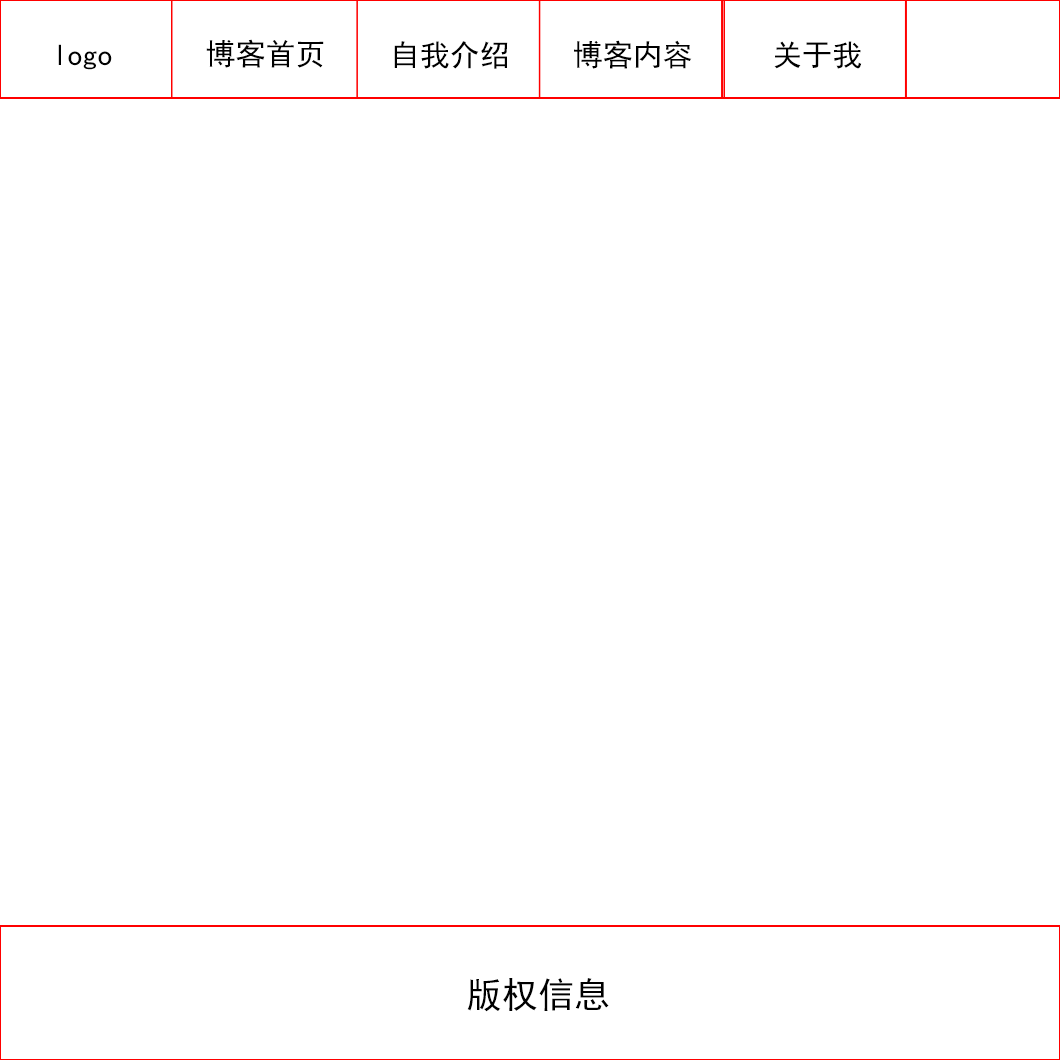
<style>
.page{position:relative;width:1060px;height:1060px;background:#ffffff}
.page>*{position:absolute;margin:0}
.t1{font:30px "SimHei";color:#000000}
.t2{font:36px "SimHei";color:#000000}
</style>
<div class="page">
<p class="t1" style="left:206px;top:39px;width:118px;height:29px">博客首页</p>
<p class="t1" style="left:394px;top:41px;width:114px;height:28px">自我介绍</p>
<p class="t1" style="left:574px;top:40px;width:118px;height:29px">博客内容</p>
<p class="t1" style="left:774px;top:41px;width:88px;height:28px">关于我</p>
<p class="t1" style="left:58px;top:44px;width:54px;height:26px">logo</p>
<p class="t2" style="left:467px;top:978px;width:142px;height:34px">版权信息</p>
</div>
